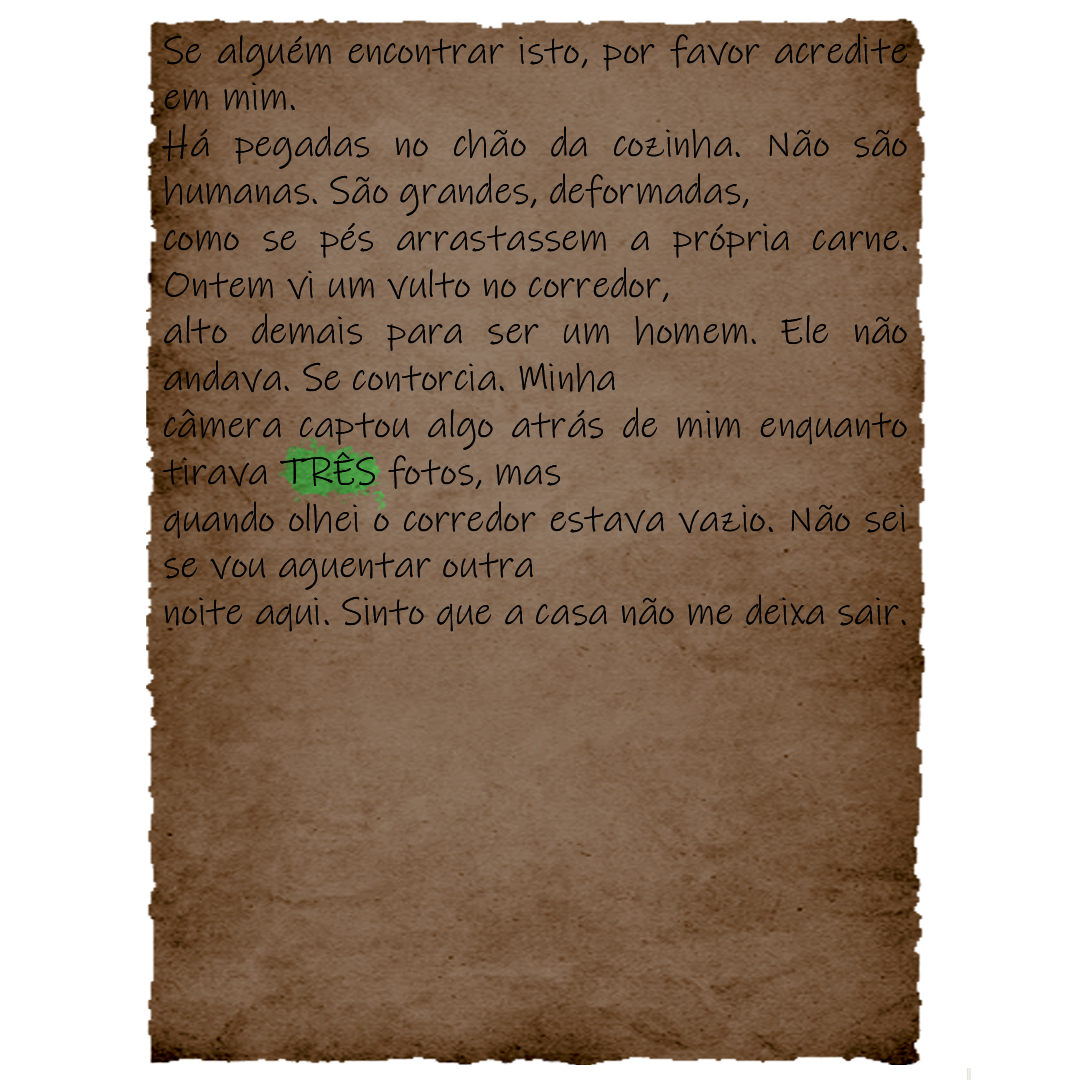
<style>
.page{position:relative;width:1080px;height:1080px;background:#ffffff}
.page>*{position:absolute;margin:0}
.t1{font:39px "InkFree";color:#000000}
</style>
<div class="page">
<p class="t1" style="left:162px;top:33px;width:745px;height:599px;text-align:justify">Se alguém encontrar isto, por favor acredite em mim.<br>Há pegadas no chão da cozinha. Não são humanas. São grandes, deformadas,<br>como se pés arrastassem a própria carne. Ontem vi um vulto no corredor,<br>alto demais para ser um homem. Ele não andava. Se contorcia. Minha<br>câmera captou algo atrás de mim enquanto tirava TRÊS fotos, mas<br>quando olhei o corredor estava vazio. Não sei se vou aguentar outra<br>noite aqui. Sinto que a casa não me deixa sair.</p>
</div>
